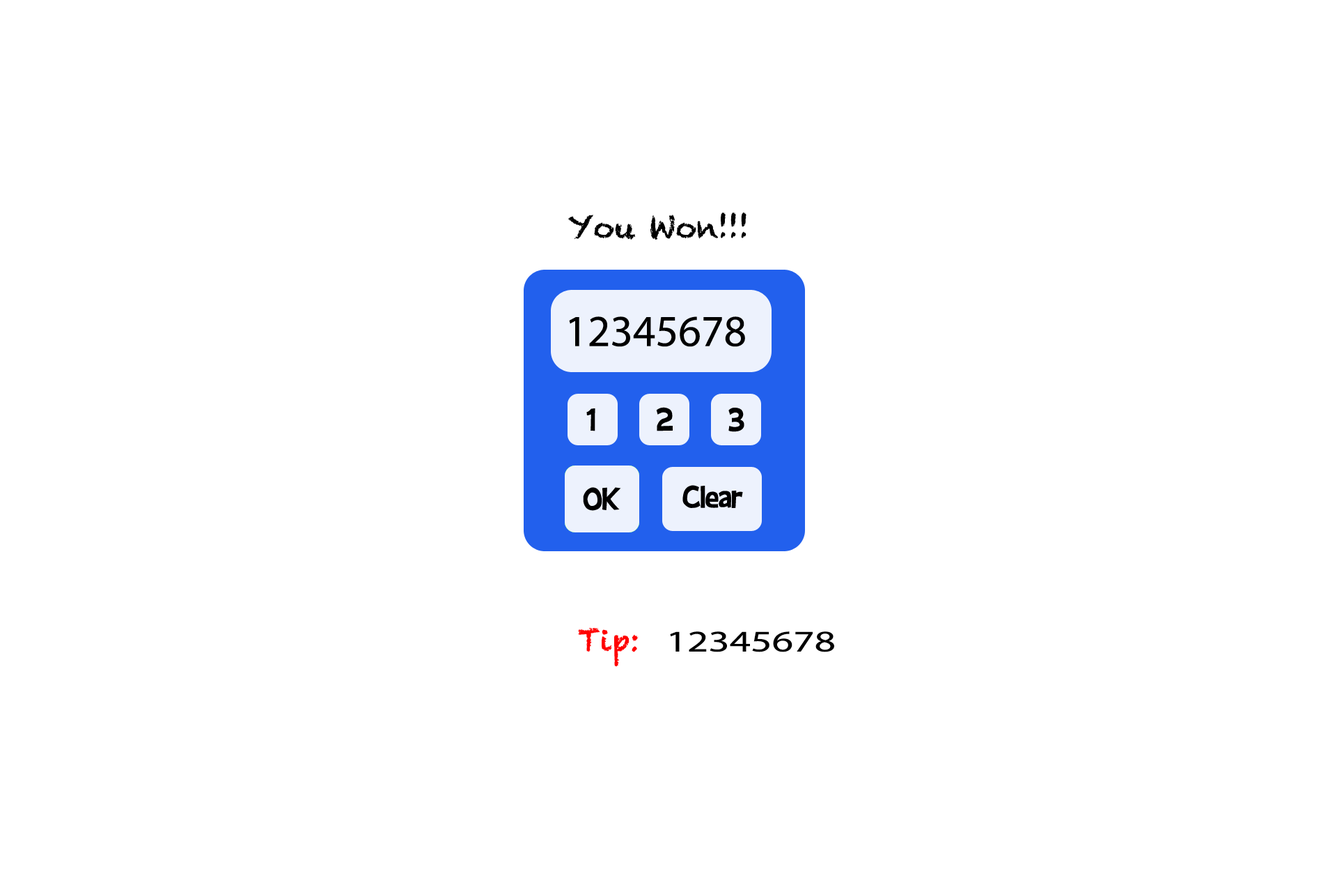
<style>
.page{position:relative;width:1337px;height:892px;background:#ffffff}
.page>*{position:absolute;margin:0}
.t1{font:29.3px "Chalkduster";color:#000000}
.t2{font:44.3px "MyriadPro-Regular";color:#000000}
.t3{font:29.3px "Chalkduster";color:#ff0000}
.t4{font:29.9px "MyriadPro-Regular";color:#000000;scale:1.38 1}
</style>
<div class="page">
<p class="t1" style="left:568px;top:212px;width:179px;height:28px">You Won!!!</p>
<p class="t2" style="left:569px;top:316px;width:176px;height:31px">12345678</p>
<p class="t3" style="left:578px;top:627px;width:61px;height:40px">Tip:</p>
<p class="t4" style="left:670px;top:631px;width:164px;height:21px">12345678</p>
</div>
